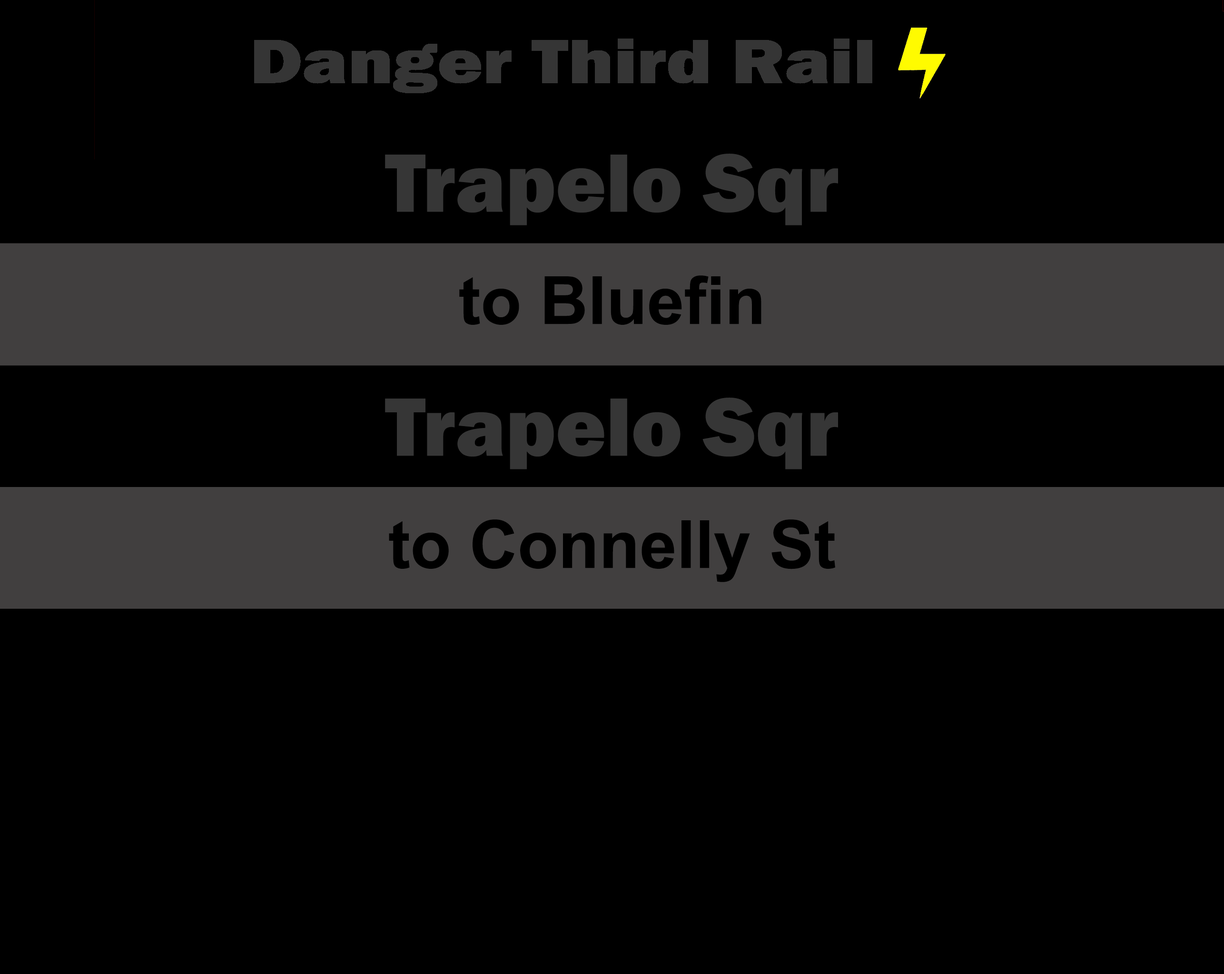
<style>
.page{position:relative;width:1224px;height:974px;background:#000000}
.page>*{position:absolute;margin:0}
.t1{font:64.2px "FranklinGothic-Heavy";color:#353535;scale:1.21 1}
.t2{font:85.6px "FranklinGothic-Heavy";color:#363636}
.t3{font:66.6px "Arial-BoldMT";color:#000000}
</style>
<div class="page">
<p class="t1" style="left:254px;top:39px;width:618px;height:54px">Danger Third Rail</p>
<p class="t2" style="left:385px;top:154px;width:453px;height:72px">Trapelo Sqr</p>
<p class="t2" style="left:385px;top:154px;width:453px;height:72px">Trapelo Sqr</p>
<p class="t3" style="left:459px;top:275px;width:302px;height:50px">to Bluefin</p>
<p class="t3" style="left:459px;top:275px;width:302px;height:50px">to Bluefin</p>
<p class="t2" style="left:385px;top:398px;width:453px;height:72px">Trapelo Sqr</p>
<p class="t2" style="left:385px;top:398px;width:453px;height:72px">Trapelo Sqr</p>
<p class="t3" style="left:389px;top:520px;width:446px;height:62px">to Connelly St</p>
<p class="t3" style="left:389px;top:520px;width:446px;height:62px">to Connelly St</p>
</div>
